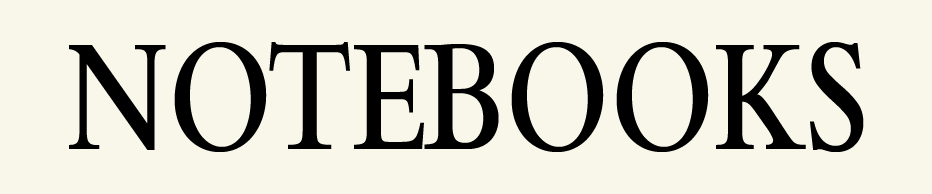
<style>
.page{position:relative;width:932px;height:194px;background:#f9f7e9}
.page>*{position:absolute;margin:0}
.t1{font:166.7px "BemboMT-SemiBold";color:#000000;scale:0.75 1}
</style>
<div class="page">
<p class="t1" style="left:69px;top:42px;width:795px;height:110px">NOTEBOOKS</p>
</div>
